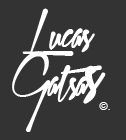
<style>
.page{position:relative;width:126px;height:140px;background:#333333}
.page>*{position:absolute;margin:0}
.t1{font:36px/48px "XtreemFatDemo";color:#ffffff}
.t2{font:60px/48px "XtreemFatDemo";color:#ffffff}
.t3{font:11px "ArialMT";color:#ffffff}
</style>
<div class="page">
<p class="t1" style="left:12px;top:8px;width:94px;height:124px;text-align:center">Lucas <br>Gatsa<span class="t2">s</span></p>
<p class="t3" style="left:99px;top:102px;width:11px;height:8px">©.</p>
</div>
